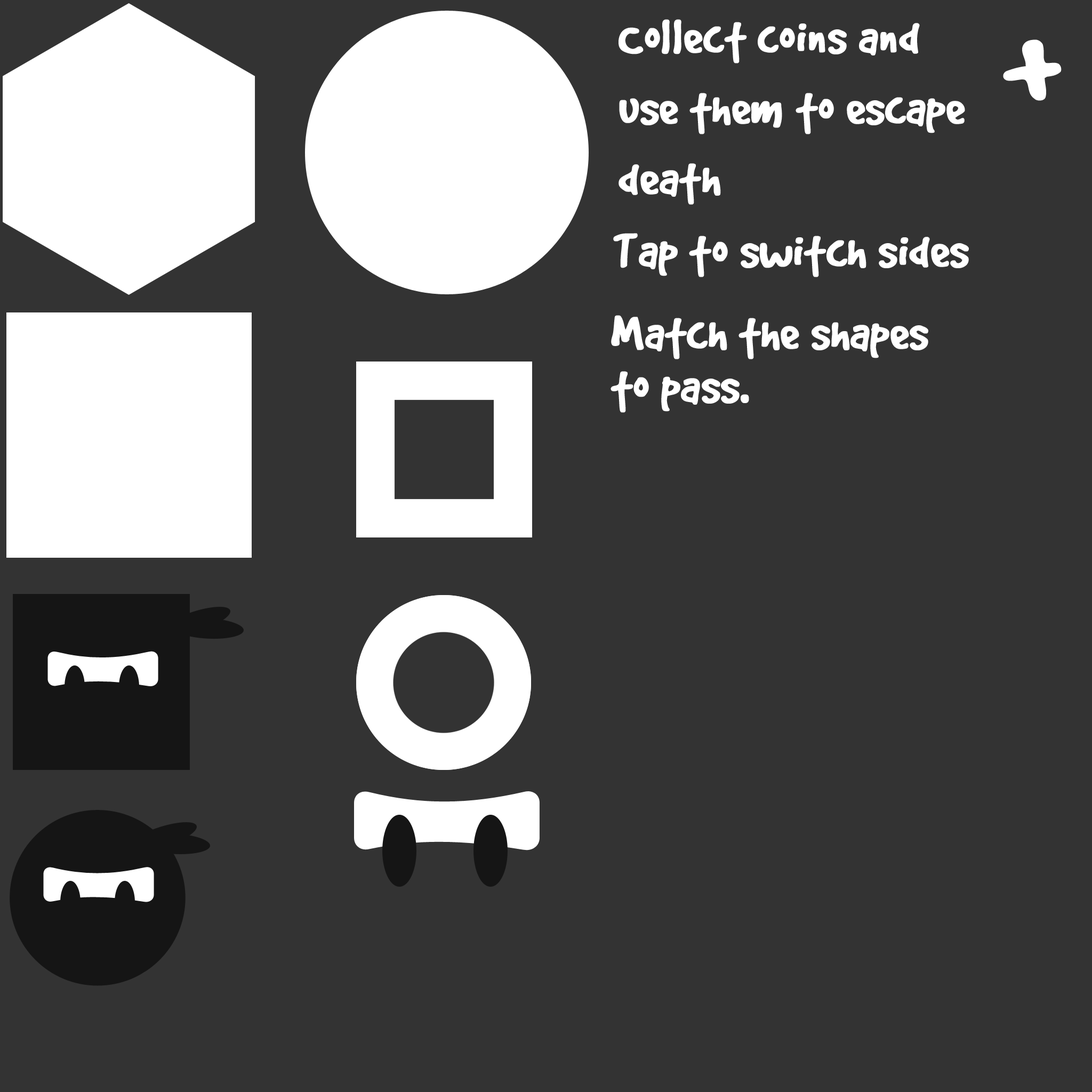
<style>
.page{position:relative;width:1092px;height:1092px;background:#333333}
.page>*{position:absolute;margin:0}
.t1{font:52.9px/70.6px "GoodDog";color:#ffffff;font-weight:bold}
.t2{font:176.5px "GoodDog";color:#ffffff;font-weight:bold}
.t3{font:52.9px "GoodDog";color:#ffffff;font-weight:bold}
.t4{font:52.9px/52.9px "GoodDog";color:#ffffff;font-weight:bold}
</style>
<div class="page">
<p class="t1" style="left:619px;top:19px;width:346px;height:186px">Collect coins and<br>use them to escape<br>death</p>
<p class="t2" style="left:1003px;top:39px;width:59px;height:62px">+</p>
<p class="t3" style="left:613px;top:233px;width:356px;height:44px">Tap to switch sides</p>
<p class="t4" style="left:611px;top:315px;width:317px;height:98px">Match the shapes<br>to pass.</p>
</div>
